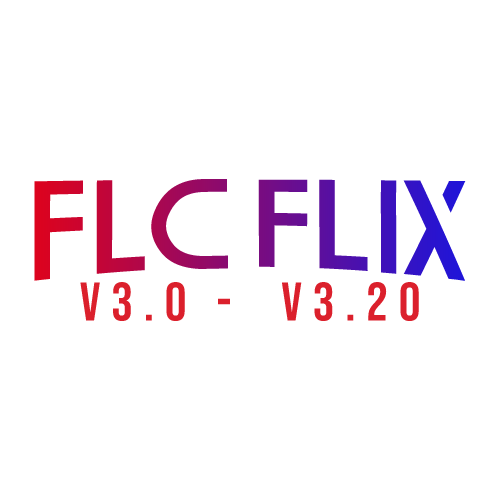
<style>
.page{position:relative;width:500px;height:500px;background:#ffffff}
.page>*{position:absolute;margin:0}
.t1{font:125px "FoundationLogo";letter-spacing:-0.3em}
.t2{font:54.2px "BebasNeue-Regular";letter-spacing:0.2em;color:#db202c}
</style>
<div class="page">
<p class="t1" style="left:34px;top:179px;width:432px;height:102px">FLC Flix</p>
<p class="t2" style="left:80px;top:282px;width:339px;height:39px">V3.0 -  V3.20</p>
</div>
